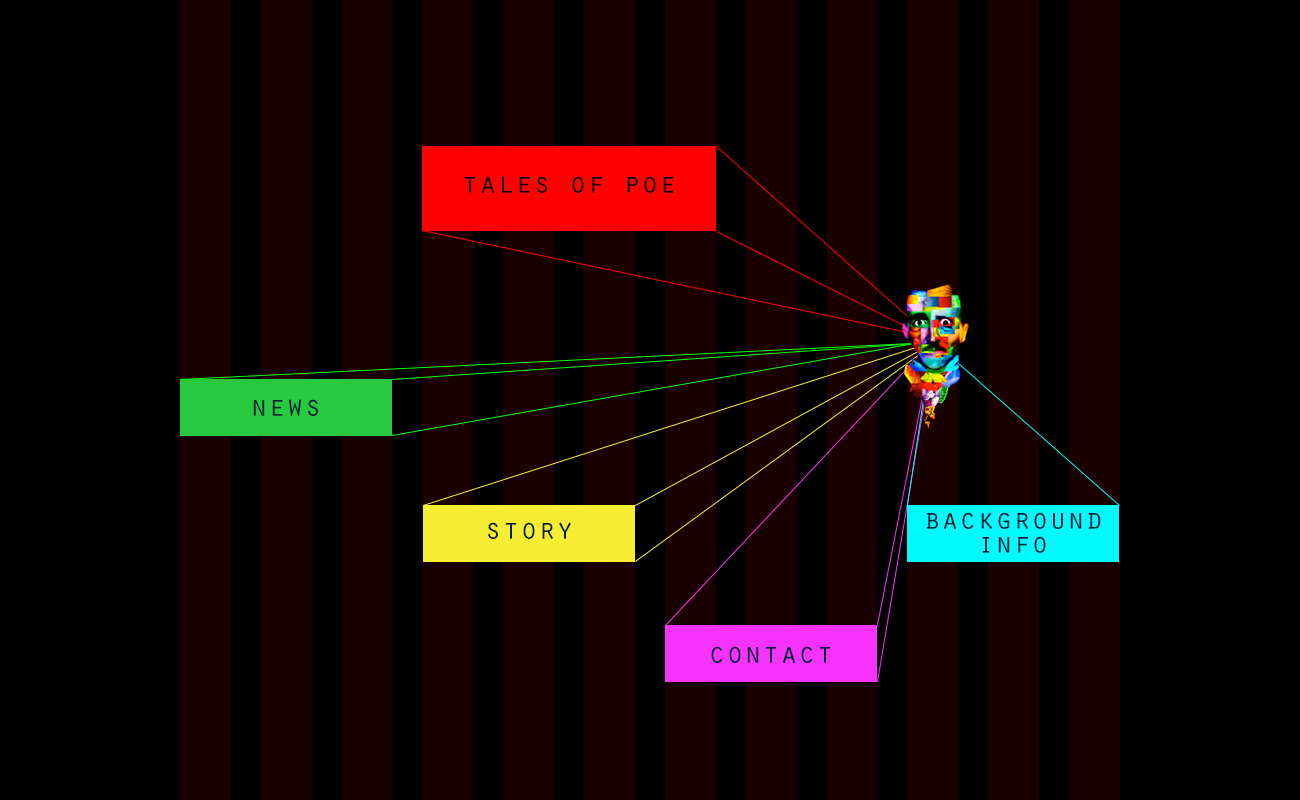
<style>
.page{position:relative;width:1300px;height:800px;background:#000000}
.page>*{position:absolute;margin:0}
.t1{font:30px "OratorStd";color:#010000}
.t2{font:30px "OratorStd";color:#002035}
.t3{font:30px/24px "OratorStd";color:#002035}
</style>
<div class="page">
<p class="t1" style="left:464px;top:176px;width:210px;height:18px">tales of poe</p>
<p class="t2" style="left:253px;top:399px;width:65px;height:18px">news</p>
<p class="t3" style="left:926px;top:512px;width:175px;height:41px;text-align:center">background<br>info</p>
<p class="t2" style="left:488px;top:522px;width:83px;height:18px">story</p>
<p class="t2" style="left:711px;top:646px;width:120px;height:18px">contact</p>
</div>
